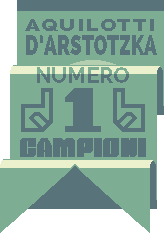
<style>
.page{position:relative;width:164px;height:233px;background:#7dad92}
.page>*{position:absolute;margin:0}
.t1{font:16px "Raleway-Heavy";letter-spacing:0.06em;color:#59737b;scale:1.4 1}
.t2{font:27.5px "Raleway-Heavy";color:#59737b;scale:0.69 1}
.t3{font:22px "Raleway-Bold"}
.t4{font:28px "PowerChord";letter-spacing:0.03em;color:#59737b}
</style>
<div class="page">
<p class="t1" style="left:25px;top:19px;width:129px;height:12px">AQUILOTTI</p>
<p class="t2" style="left:26px;top:35px;width:131px;height:20px">D’ARSTOTZKA</p>
<p class="t3" style="left:37px;top:67px;width:92px;height:16px">NUMERO</p>
<p class="t4" style="left:20px;top:138px;width:126px;height:19px">CAMPIONI</p>
</div>
